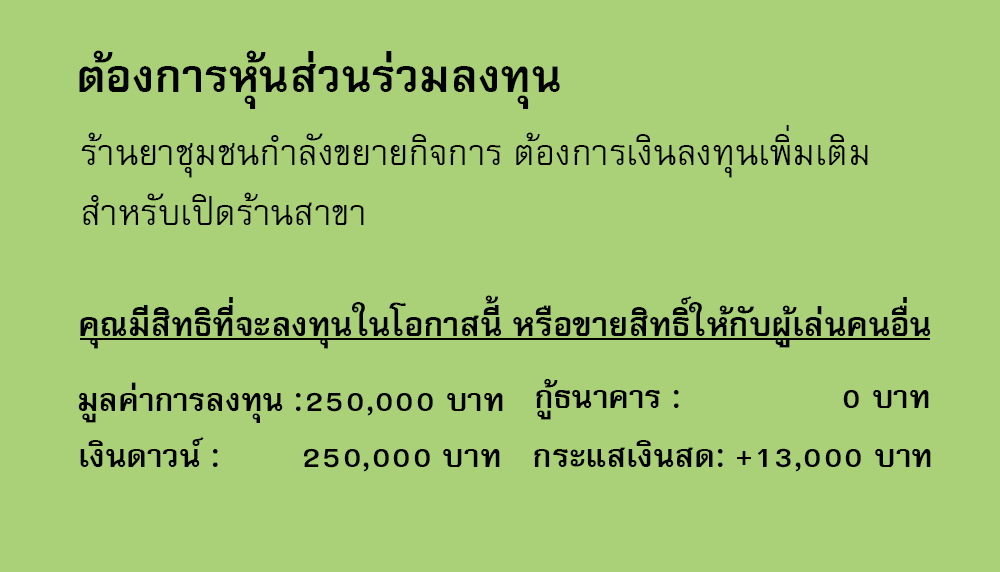
<style>
.page{position:relative;width:1000px;height:572px;background:#aad178}
.page>*{position:absolute;margin:0}
.t1{font:64px "FreesiaUPCBold";color:#000000}
.t2{font:50px/60px "FreesiaUPC";color:#000000}
.t3{font:47px "FreesiaUPCBold";color:#000000}
.t4{font:45px "FreesiaUPCBold";color:#000000}
</style>
<div class="page">
<p class="t1" style="left:79px;top:50px;width:481px;height:59px">ต้องการหุ้นส่วนร่วมลงทุน</p>
<p class="t2" style="left:81px;top:125px;width:787px;height:100px">ร้านยาชุมชนกำลังขยายกิจการ ต้องการเงินลงทุนเพิ่มเติม<br>สำหรับเปิดร้านสาขา</p>
<p class="t3" style="left:80px;top:295px;width:851px;height:54px">คุณมีสิทธิที่จะลงทุนในโอกาสนี้ หรือขายสิทธิ์ให้กับผู้เล่นคนอื่น</p>
<p class="t4" style="left:78px;top:382px;width:425px;height:41px">มูลค่าการลงทุน :250,000 บาท</p>
<p class="t4" style="left:536px;top:379px;width:393px;height:41px">กู้ธนาคาร :                0 บาท</p>
<p class="t4" style="left:80px;top:436px;width:420px;height:36px">เงินดาวน์ :        250,000 บาท</p>
<p class="t4" style="left:534px;top:440px;width:397px;height:32px">กระแสเงินสด: +13,000 บาท</p>
</div>
